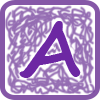
<style>
.page{position:relative;width:100px;height:100px}
.page>*{position:absolute;margin:0}
.t1{font:75px "SegoeScript-Bold";color:#5d0f99}
</style>
<div class="page">
<p class="t1" style="left:19px;top:21px;width:62px;height:57px;opacity:0.9">A</p>
</div>
